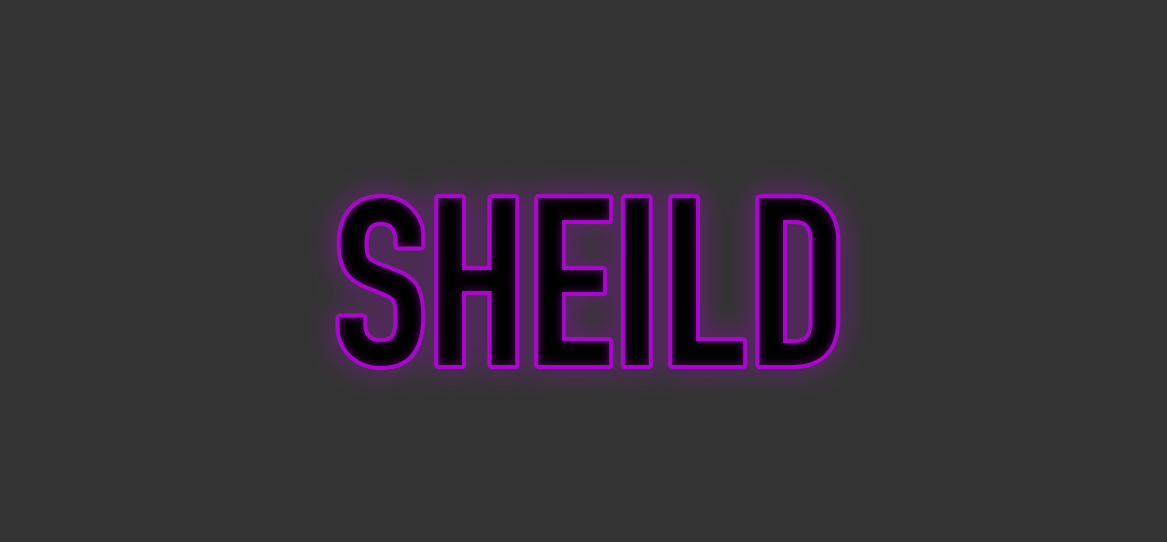
<style>
.page{position:relative;width:1167px;height:542px;background:#333333}
.page>*{position:absolute;margin:0}
.t1{font:233.7px "DINEngschrift";color:#080009}
</style>
<div class="page">
<p class="t1" style="left:339px;top:198px;width:498px;height:168px">SHEILD</p>
</div>
